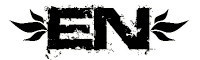
<style>
.page{position:relative;width:200px;height:60px;background:#ffffff}
.page>*{position:absolute;margin:0}
.t1{font:60px "Defused-ExtendedBold";color:#000000}
</style>
<div class="page">
<p class="t1" style="left:9px;top:4px;width:180px;height:57px">{EN}</p>
</div>
